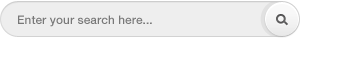
<style>
.page{position:relative;width:350px;height:80px;background:#ffffff}
.page>*{position:absolute;margin:0}
.t1{font:12px "HelveticaNeue-Medium";color:#787878}
</style>
<div class="page">
<p class="t1" style="left:18px;top:15px;width:134px;height:12px">Enter your search here...</p>
</div>
